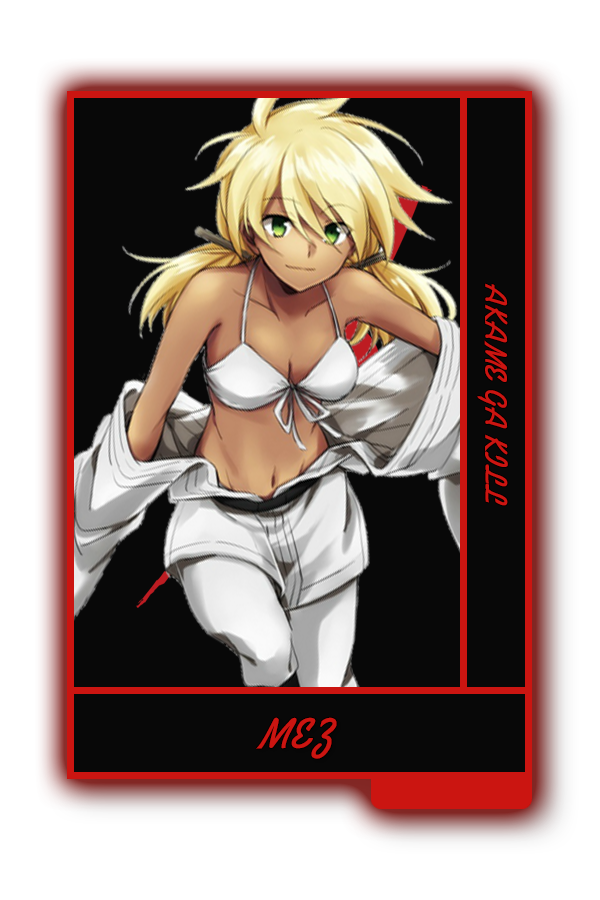
<style>
.page{position:relative;width:600px;height:900px;background:#080808}
.page>*{position:absolute;margin:0}
.t1{font:31.2px "Alako-Bold";color:#cb1511}
.t2{font:43.2px "Alako-Bold";color:#cb1511}
</style>
<div class="page">
<p class="t1" style="left:477px;top:283px;width:31px;height:223px;rotate:90deg">AKAME GA KILL</p>
<p class="t2" style="left:256px;top:717px;width:81px;height:42px">MEZ</p>
</div>
